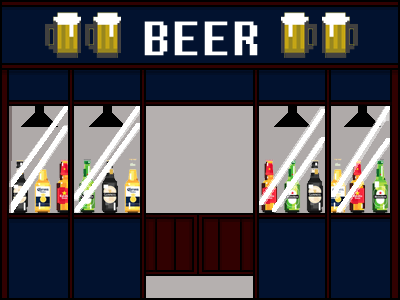
<style>
.page{position:relative;width:400px;height:300px;background:#02122f}
.page>*{position:absolute;margin:0}
.t1{font:60px "Fixedsys";color:#ffffff}
</style>
<div class="page">
<p class="t1" style="left:144px;top:21px;width:114px;height:35px">BEER</p>
</div>
